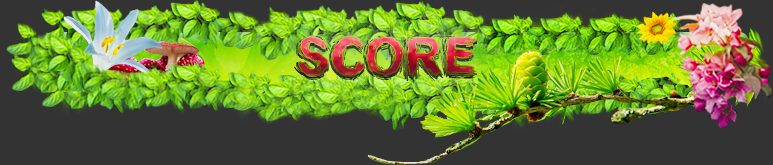
<style>
.page{position:relative;width:773px;height:165px;background:#333333}
.page>*{position:absolute;margin:0}
.t1{font:52px "SplinterWood"}
</style>
<div class="page">
<p class="t1" style="left:296px;top:34px;width:180px;height:45px">SCORE</p>
</div>
